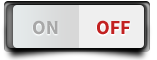
<style>
.page{position:relative;width:157px;height:60px;background:#efefef}
.page>*{position:absolute;margin:0}
.t1{font:20px "SourceSansPro-Bold";color:#a8a8a8}
.t2{font:20px "SourceSansPro-Bold";color:#c22121}
</style>
<div class="page">
<p class="t1" style="left:33px;top:20px;width:25px;height:15px">ON</p>
<p class="t2" style="left:97px;top:20px;width:33px;height:15px">OFF</p>
</div>
